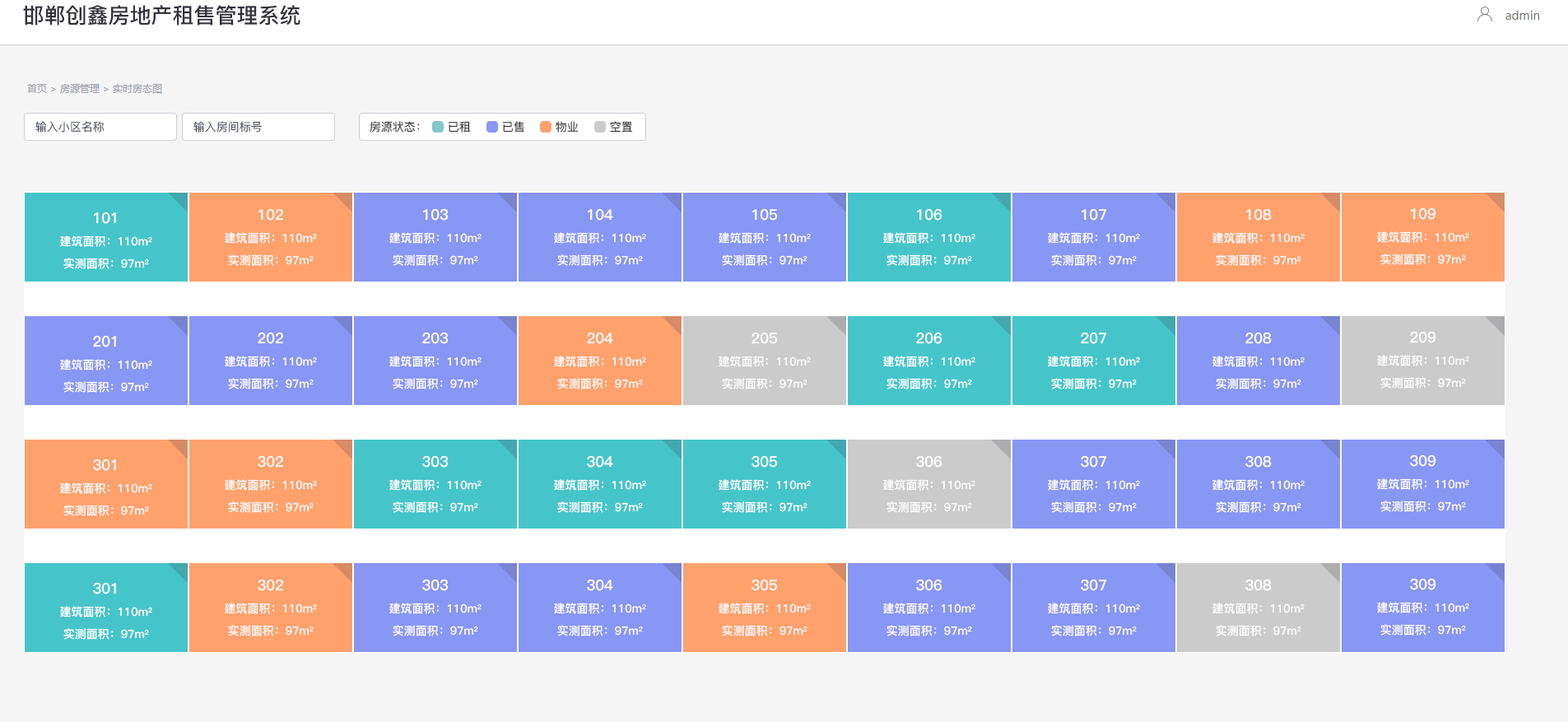
<style>
.page{position:relative;width:1568px;height:722px;background:#f5f5f5}
.page>*{position:absolute;margin:0}
.t1{font:21.4px "PingFang-SC-Bold";color:#32323c}
.t2{font:11.5px "PingFang-SC-Medium";color:#4c5060}
.t3{font:11.5px "PingFang-SC-Medium";color:#333333}
.t4{font:11.5px/22.2px "PingFang-SC-Bold";color:#ffffff}
.t5{font:14.8px/22.2px "PingFang-SC-Bold";color:#ffffff}
</style>
<div class="page">
<p class="t1" style="left:23px;top:5px;width:277px;height:21px">邯郸创鑫房地产租售管理系统</p>
<p class="t2" style="left:35px;top:121px;width:70px;height:12px">输入小区名称</p>
<p class="t2" style="left:193px;top:121px;width:70px;height:12px">输入房间标号</p>
<p class="t3" style="left:370px;top:121px;width:50px;height:12px">房源状态：</p>
<p class="t3" style="left:448px;top:121px;width:23px;height:12px">已租</p>
<p class="t3" style="left:502px;top:121px;width:22px;height:12px">已售</p>
<p class="t3" style="left:556px;top:121px;width:23px;height:12px">物业</p>
<p class="t3" style="left:610px;top:121px;width:23px;height:12px">空置</p>
<p class="t4" style="left:225px;top:208px;width:92px;height:58px;text-align:center"><span class="t5">102<br></span>建筑面积：110m2<br>实测面积：97m2</p>
<p class="t4" style="left:389px;top:208px;width:93px;height:58px;text-align:center"><span class="t5">103<br></span>建筑面积：110m2<br>实测面积：97m2</p>
<p class="t4" style="left:554px;top:208px;width:92px;height:58px;text-align:center"><span class="t5">104<br></span>建筑面积：110m2<br>实测面积：97m2</p>
<p class="t4" style="left:719px;top:208px;width:92px;height:58px;text-align:center"><span class="t5">105<br></span>建筑面积：110m2<br>实测面积：97m2</p>
<p class="t4" style="left:883px;top:208px;width:92px;height:58px;text-align:center"><span class="t5">106<br></span>建筑面积：110m2<br>实测面积：97m2</p>
<p class="t4" style="left:1048px;top:208px;width:92px;height:58px;text-align:center"><span class="t5">107<br></span>建筑面积：110m2<br>实测面积：97m2</p>
<p class="t4" style="left:1212px;top:208px;width:93px;height:58px;text-align:center"><span class="t5">108<br></span>建筑面积：110m2<br>实测面积：97m2</p>
<p class="t4" style="left:1377px;top:207px;width:92px;height:58px;text-align:center"><span class="t5">109<br></span>建筑面积：110m2<br>实测面积：97m2</p>
<p class="t4" style="left:60px;top:212px;width:92px;height:57px;text-align:center"><span class="t5">101<br></span>建筑面积：110m2<br>实测面积：97m2</p>
<p class="t4" style="left:60px;top:335px;width:92px;height:58px;text-align:center"><span class="t5">201<br></span>建筑面积：110m2<br>实测面积：97m2</p>
<p class="t4" style="left:225px;top:332px;width:92px;height:57px;text-align:center"><span class="t5">202<br></span>建筑面积：110m2<br>实测面积：97m2</p>
<p class="t4" style="left:389px;top:332px;width:93px;height:57px;text-align:center"><span class="t5">203<br></span>建筑面积：110m2<br>实测面积：97m2</p>
<p class="t4" style="left:554px;top:332px;width:92px;height:57px;text-align:center"><span class="t5">204<br></span>建筑面积：110m2<br>实测面积：97m2</p>
<p class="t4" style="left:719px;top:332px;width:92px;height:57px;text-align:center"><span class="t5">205<br></span>建筑面积：110m2<br>实测面积：97m2</p>
<p class="t4" style="left:883px;top:332px;width:92px;height:57px;text-align:center"><span class="t5">206<br></span>建筑面积：110m2<br>实测面积：97m2</p>
<p class="t4" style="left:1048px;top:332px;width:92px;height:57px;text-align:center"><span class="t5">207<br></span>建筑面积：110m2<br>实测面积：97m2</p>
<p class="t4" style="left:1212px;top:332px;width:93px;height:57px;text-align:center"><span class="t5">208<br></span>建筑面积：110m2<br>实测面积：97m2</p>
<p class="t4" style="left:1377px;top:331px;width:92px;height:58px;text-align:center"><span class="t5">209<br></span>建筑面积：110m2<br>实测面积：97m2</p>
<p class="t4" style="left:60px;top:458px;width:92px;height:58px;text-align:center"><span class="t5">301<br></span>建筑面积：110m2<br>实测面积：97m2</p>
<p class="t4" style="left:225px;top:455px;width:92px;height:58px;text-align:center"><span class="t5">302<br></span>建筑面积：110m2<br>实测面积：97m2</p>
<p class="t4" style="left:389px;top:455px;width:93px;height:58px;text-align:center"><span class="t5">303<br></span>建筑面积：110m2<br>实测面积：97m2</p>
<p class="t4" style="left:554px;top:455px;width:92px;height:58px;text-align:center"><span class="t5">304<br></span>建筑面积：110m2<br>实测面积：97m2</p>
<p class="t4" style="left:719px;top:455px;width:92px;height:58px;text-align:center"><span class="t5">305<br></span>建筑面积：110m2<br>实测面积：97m2</p>
<p class="t4" style="left:883px;top:455px;width:92px;height:58px;text-align:center"><span class="t5">306<br></span>建筑面积：110m2<br>实测面积：97m2</p>
<p class="t4" style="left:1048px;top:455px;width:92px;height:58px;text-align:center"><span class="t5">307<br></span>建筑面积：110m2<br>实测面积：97m2</p>
<p class="t4" style="left:1212px;top:455px;width:93px;height:58px;text-align:center"><span class="t5">308<br></span>建筑面积：110m2<br>实测面积：97m2</p>
<p class="t4" style="left:1377px;top:454px;width:92px;height:58px;text-align:center"><span class="t5">309<br></span>建筑面积：110m2<br>实测面积：97m2</p>
<p class="t4" style="left:60px;top:582px;width:92px;height:58px;text-align:center"><span class="t5">301<br></span>建筑面积：110m2<br>实测面积：97m2</p>
<p class="t4" style="left:225px;top:579px;width:92px;height:57px;text-align:center"><span class="t5">302<br></span>建筑面积：110m2<br>实测面积：97m2</p>
<p class="t4" style="left:389px;top:579px;width:93px;height:57px;text-align:center"><span class="t5">303<br></span>建筑面积：110m2<br>实测面积：97m2</p>
<p class="t4" style="left:554px;top:579px;width:92px;height:57px;text-align:center"><span class="t5">304<br></span>建筑面积：110m2<br>实测面积：97m2</p>
<p class="t4" style="left:719px;top:579px;width:92px;height:57px;text-align:center"><span class="t5">305<br></span>建筑面积：110m2<br>实测面积：97m2</p>
<p class="t4" style="left:883px;top:579px;width:92px;height:57px;text-align:center"><span class="t5">306<br></span>建筑面积：110m2<br>实测面积：97m2</p>
<p class="t4" style="left:1048px;top:579px;width:92px;height:57px;text-align:center"><span class="t5">307<br></span>建筑面积：110m2<br>实测面积：97m2</p>
<p class="t4" style="left:1212px;top:579px;width:93px;height:57px;text-align:center"><span class="t5">308<br></span>建筑面积：110m2<br>实测面积：97m2</p>
<p class="t4" style="left:1377px;top:578px;width:92px;height:57px;text-align:center"><span class="t5">309<br></span>建筑面积：110m2<br>实测面积：97m2</p>
</div>
